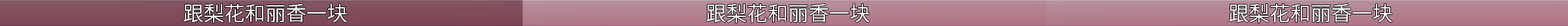
<style>
.page{position:relative;width:1568px;height:26px}
.page>*{position:absolute;margin:0}
.t1{font:20.6px "SourceHanSansSC-Normal";color:#ffffff}
</style>
<div class="page">
<p class="t1" style="left:184px;top:3px;width:163px;height:20px">跟梨花和丽香一块</p>
<p class="t1" style="left:706px;top:3px;width:164px;height:20px">跟梨花和丽香一块</p>
<p class="t1" style="left:1229px;top:3px;width:163px;height:20px">跟梨花和丽香一块</p>
</div>
